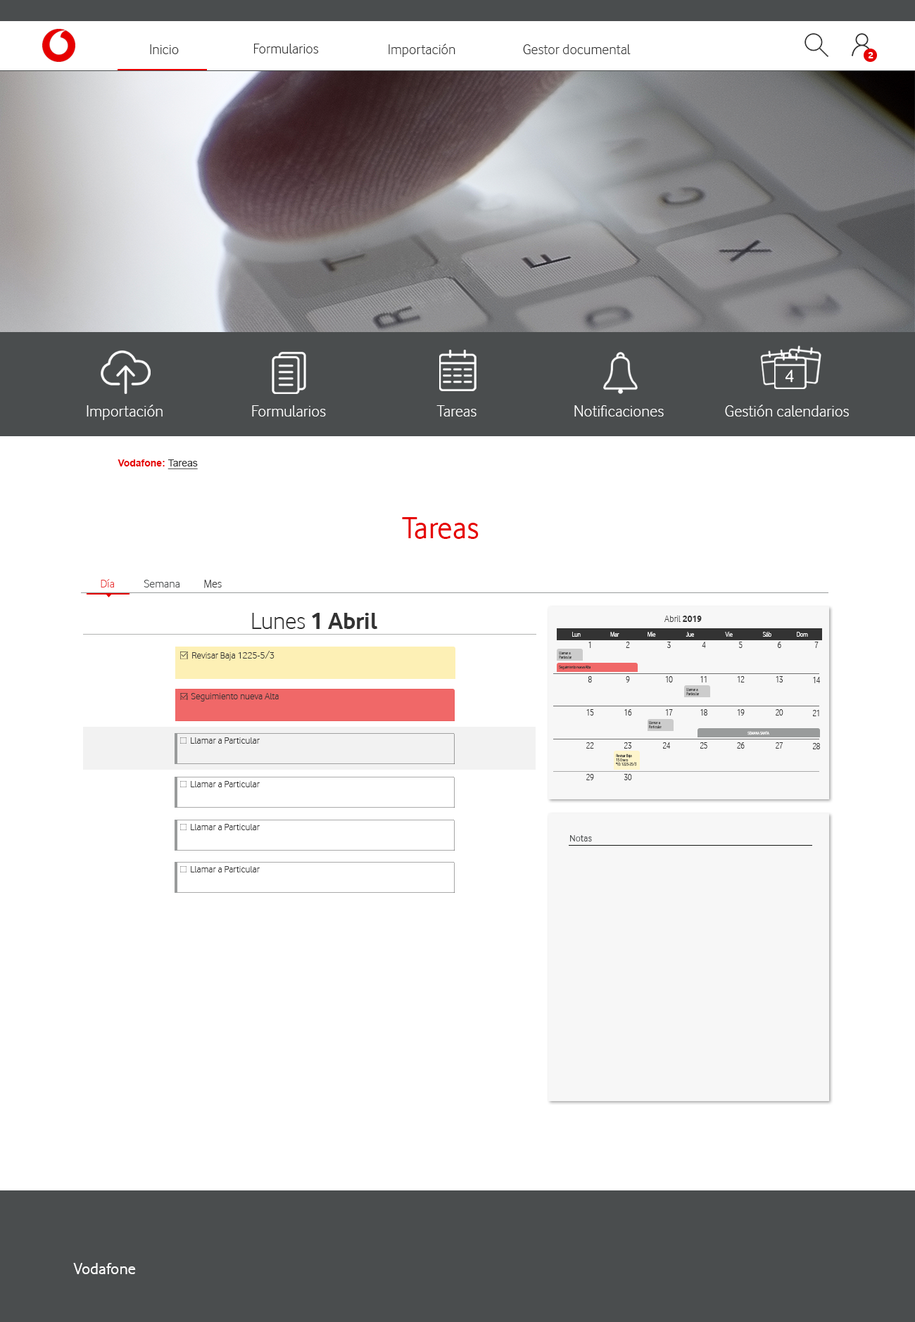
<style>
.page{position:relative;width:915px;height:1322px;background:#ffffff}
.page>*{position:absolute;margin:0}
.t1{font:14.8px "VodafoneLt-Regular";color:#333333}
.t2{font:9.9px "VodafoneRg-Bold";color:#ffffff}
.t3{font:18.3px "VodafoneRg-Regular";color:#ffffff}
.t4{font:16.9px "VodafoneLt-Regular";color:#ffffff}
.t5{font:9.9px "Arial-BoldMT";color:#e60000}
.t6{font:9.9px "ArialMT";color:#333333;text-decoration:underline}
.t7{font:31.7px "VodafoneRg-Regular";color:#e60000}
.t8{font:11.8px "VodafoneLt-Regular";color:#e93636}
.t9{font:11.8px "VodafoneLt-Regular";color:#4a4d4e}
.t10{font:11.8px "VodafoneLt-Regular";color:#333333}
.t11{font:24.3px "VodafoneRg-Bold";color:#333333}
.t12{font:24.3px "VodafoneLt-Regular";color:#333333}
.t13{font:9.9px "VodafoneLt-Regular";color:#333333;scale:0.95 1}
.t14{font:9.9px "VodafoneRg-Bold";color:#333333;scale:0.95 1}
.t15{font:7.3px "VodafoneLt-Regular";color:#ffffff;scale:0.84 1}
.t16{font:9px "VodafoneLt-Regular";color:#333333;scale:0.84 1}
.t17{font:9.9px "VodafoneLt-Regular";color:#333333}
.t18{font:4.2px/4.2px "VodafoneLt-Regular";scale:0.84 1}
.t19{font:4.2px "VodafoneLt-Regular";color:#333333;scale:0.84 1}
.t20{font:4.2px/4.2px "VodafoneLt-Regular";color:#333333;scale:0.84 1}
.t21{font:4.2px "VodafoneLt-Regular";color:#ffffff;scale:0.84 1}
.t22{font:9.9px "VodafoneRg-Regular";color:#4a4d4e}
.t23{font:16.9px "VodafoneRg-Regular";color:#ffffff}
</style>
<div class="page">
<p class="t1" style="left:150px;top:44px;width:29px;height:10px">Inicio</p>
<p class="t1" style="left:254px;top:44px;width:65px;height:9px">Formularios</p>
<p class="t1" style="left:388px;top:44px;width:67px;height:13px">Importación</p>
<p class="t1" style="left:523px;top:44px;width:108px;height:10px">Gestor documental</p>
<p class="t2" style="left:868px;top:52px;width:5px;height:6px">2</p>
<p class="t3" style="left:785px;top:369px;width:9px;height:14px">4</p>
<p class="t4" style="left:87px;top:405px;width:76px;height:15px">Importación</p>
<p class="t4" style="left:252px;top:405px;width:74px;height:12px">Formularios</p>
<p class="t4" style="left:436px;top:405px;width:40px;height:12px">Tareas</p>
<p class="t4" style="left:574px;top:405px;width:90px;height:12px">Notificaciones</p>
<p class="t4" style="left:725px;top:405px;width:124px;height:12px">Gestión calendarios</p>
<p class="t5" style="left:118px;top:460px;width:80px;height:9px">Vodafone: <span class="t6">Tareas</span></p>
<p class="t7" style="left:402px;top:517px;width:77px;height:22px">Tareas</p>
<p class="t8" style="left:101px;top:579px;width:13px;height:9px">Día</p>
<p class="t9" style="left:144px;top:580px;width:35px;height:8px">Semana</p>
<p class="t10" style="left:204px;top:580px;width:18px;height:8px">Mes</p>
<p class="t11" style="left:252px;top:613px;width:126px;height:16px"><span class="t12">Lunes </span>1 Abril</p>
<p class="t13" style="left:664px;top:616px;width:38px;height:6px">Abril <span class="t14">2019</span></p>
<p class="t15" style="left:572px;top:632px;width:9px;height:5px">Lun</p>
<p class="t16" style="left:588px;top:642px;width:3px;height:6px">1</p>
<p class="t15" style="left:610px;top:632px;width:9px;height:5px">Mar</p>
<p class="t16" style="left:626px;top:642px;width:4px;height:6px">2</p>
<p class="t15" style="left:647px;top:632px;width:9px;height:5px">Mie</p>
<p class="t16" style="left:667px;top:642px;width:4px;height:6px">3</p>
<p class="t15" style="left:685px;top:632px;width:9px;height:5px">Jue</p>
<p class="t16" style="left:702px;top:642px;width:4px;height:6px">4</p>
<p class="t15" style="left:725px;top:632px;width:8px;height:5px">Vie</p>
<p class="t16" style="left:738px;top:642px;width:4px;height:6px">5</p>
<p class="t15" style="left:762px;top:632px;width:9px;height:5px">Sáb</p>
<p class="t16" style="left:778px;top:642px;width:3px;height:6px">6</p>
<p class="t15" style="left:797px;top:632px;width:11px;height:5px">Dom</p>
<p class="t16" style="left:814px;top:642px;width:4px;height:6px">7</p>
<p class="t17" style="left:192px;top:651px;width:82px;height:10px">Revisar Baja 1225-5/3</p>
<p class="t18" style="left:559px;top:651px;width:13px;height:8px">Llamar a<br>Particular</p>
<p class="t19" style="left:559px;top:665px;width:31px;height:5px">Seguimiento nueva Alta</p>
<p class="t16" style="left:588px;top:676px;width:4px;height:7px">8</p>
<p class="t16" style="left:626px;top:676px;width:4px;height:7px">9</p>
<p class="t16" style="left:665px;top:676px;width:8px;height:7px">10</p>
<p class="t16" style="left:700px;top:676px;width:7px;height:7px">11</p>
<p class="t16" style="left:737px;top:676px;width:8px;height:7px">12</p>
<p class="t16" style="left:776px;top:676px;width:7px;height:7px">13</p>
<p class="t16" style="left:813px;top:677px;width:7px;height:6px">14</p>
<p class="t18" style="left:686px;top:688px;width:14px;height:8px">Llamar a<br>Particular</p>
<p class="t17" style="left:191px;top:693px;width:88px;height:9px">Seguimiento nueva Alta</p>
<p class="t16" style="left:586px;top:709px;width:8px;height:7px">15</p>
<p class="t16" style="left:624px;top:709px;width:8px;height:7px">16</p>
<p class="t16" style="left:665px;top:709px;width:8px;height:7px">17</p>
<p class="t16" style="left:700px;top:709px;width:7px;height:7px">18</p>
<p class="t16" style="left:737px;top:709px;width:8px;height:7px">19</p>
<p class="t16" style="left:776px;top:709px;width:7px;height:7px">20</p>
<p class="t16" style="left:813px;top:710px;width:6px;height:6px">21</p>
<p class="t20" style="left:649px;top:721px;width:13px;height:8px">Llamar a<br>Particular</p>
<p class="t17" style="left:191px;top:738px;width:69px;height:6px">Llamar a Particular</p>
<p class="t21" style="left:747px;top:731px;width:22px;height:4px">SEMANA SANTA</p>
<p class="t16" style="left:586px;top:742px;width:8px;height:7px">22</p>
<p class="t16" style="left:624px;top:742px;width:7px;height:7px">23</p>
<p class="t16" style="left:663px;top:742px;width:7px;height:7px">24</p>
<p class="t16" style="left:700px;top:742px;width:7px;height:7px">25</p>
<p class="t16" style="left:737px;top:742px;width:8px;height:7px">26</p>
<p class="t16" style="left:776px;top:742px;width:7px;height:7px">27</p>
<p class="t16" style="left:813px;top:743px;width:7px;height:6px">28</p>
<p class="t20" style="left:616px;top:754px;width:21px;height:12px">Revisar Baja<br>15 Enero<br>*ID: 1225-25/3</p>
<p class="t17" style="left:191px;top:781px;width:69px;height:6px">Llamar a Particular</p>
<p class="t16" style="left:586px;top:774px;width:8px;height:6px">29</p>
<p class="t16" style="left:624px;top:774px;width:8px;height:6px">30</p>
<p class="t17" style="left:191px;top:824px;width:69px;height:6px">Llamar a Particular</p>
<p class="t22" style="left:570px;top:835px;width:22px;height:7px">Notas</p>
<p class="t17" style="left:191px;top:866px;width:69px;height:7px">Llamar a Particular</p>
<p class="t23" style="left:73px;top:1263px;width:63px;height:11px">Vodafone</p>
</div>
